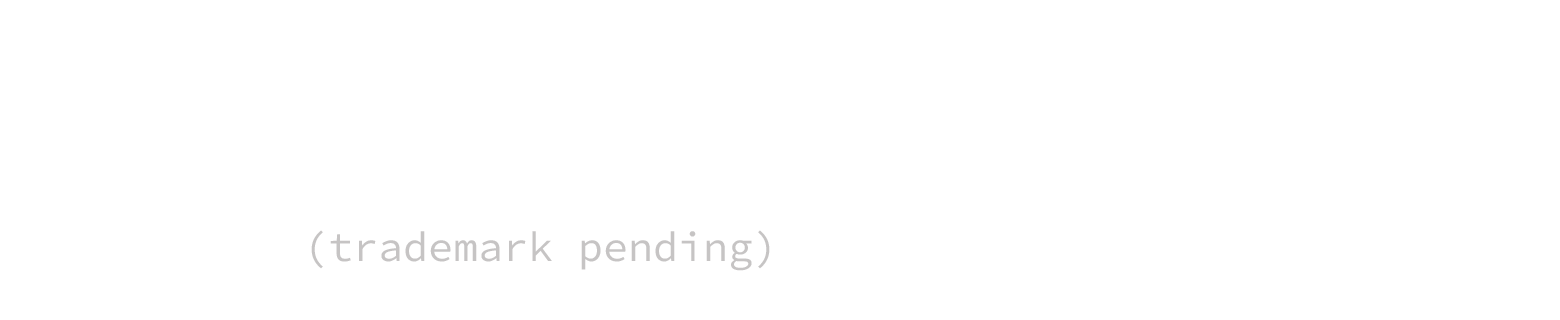
<style>
.page{position:relative;width:1560px;height:320px;background:#ffffff}
.page>*{position:absolute;margin:0}
.t1{font:41.7px "SourceCodePro-Regular";color:#c6c4c4}
</style>
<div class="page">
<p class="t1" style="left:311px;top:230px;width:459px;height:41px">(trademark pending)</p>
</div>
